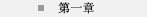
<style>
.page{position:relative;width:147px;height:17px;background:#f1f1f1}
.page>*{position:absolute;margin:0}
.t1{font:12px "SimSun";color:#000000;font-weight:bold}
</style>
<div class="page">
<p class="t1" style="left:38px;top:0px;width:77px;height:17px">第一章</p>
</div>
